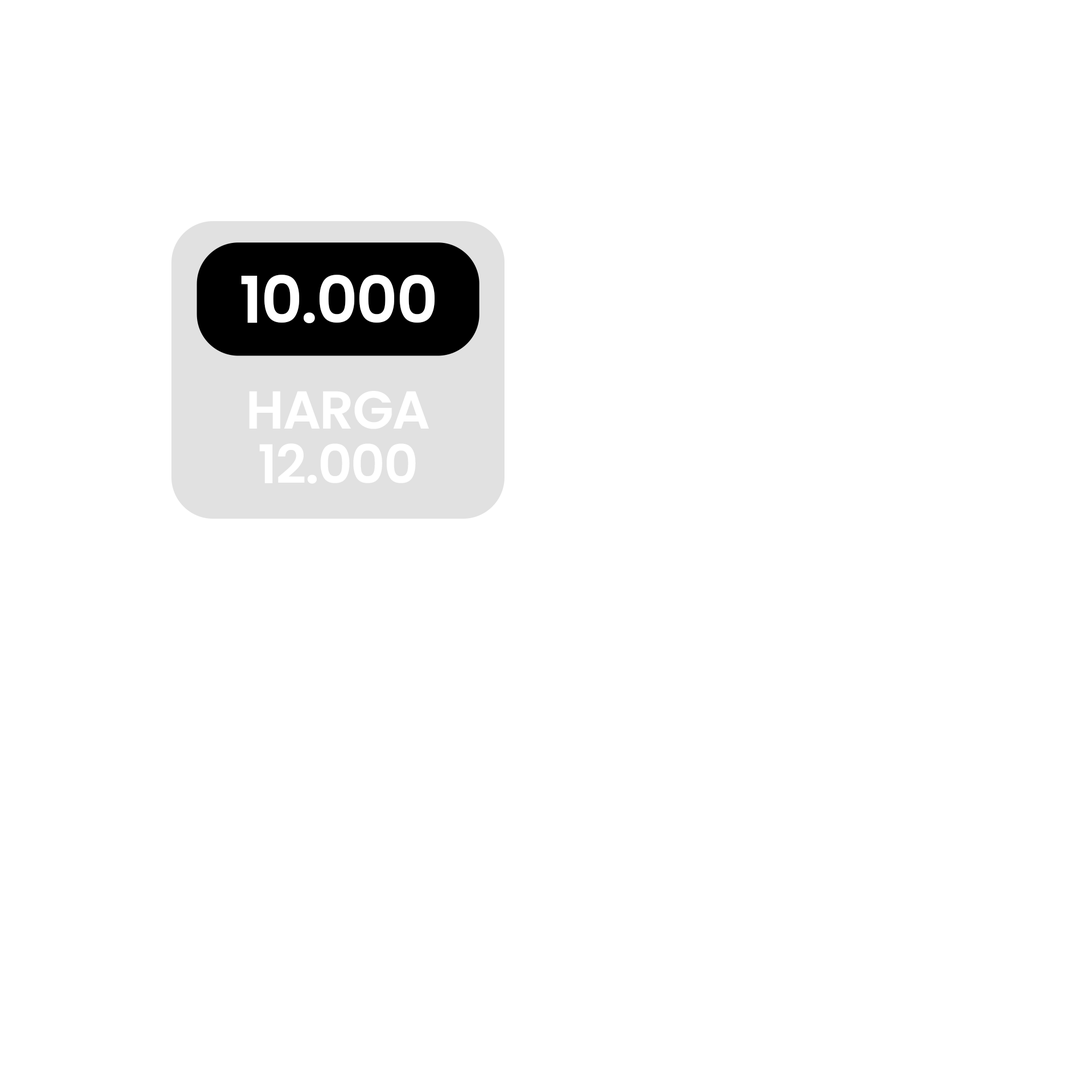
<style>
.page{position:relative;width:1092px;height:1092px;background:#ffffff}
.page>*{position:absolute;margin:0}
.t1{font:64.4px "Poppins-SemiBold";letter-spacing:-0.025em;color:#ffffff}
.t2{font:53.3px/54.6px "Poppins-SemiBold";letter-spacing:-0.025em;color:#ffffff}
</style>
<div class="page">
<p class="t1" style="left:241px;top:275px;width:194px;height:48px">10.000</p>
<p class="t2" style="left:249px;top:391px;width:180px;height:93px;text-align:center">HARGA<br>12.000</p>
</div>
